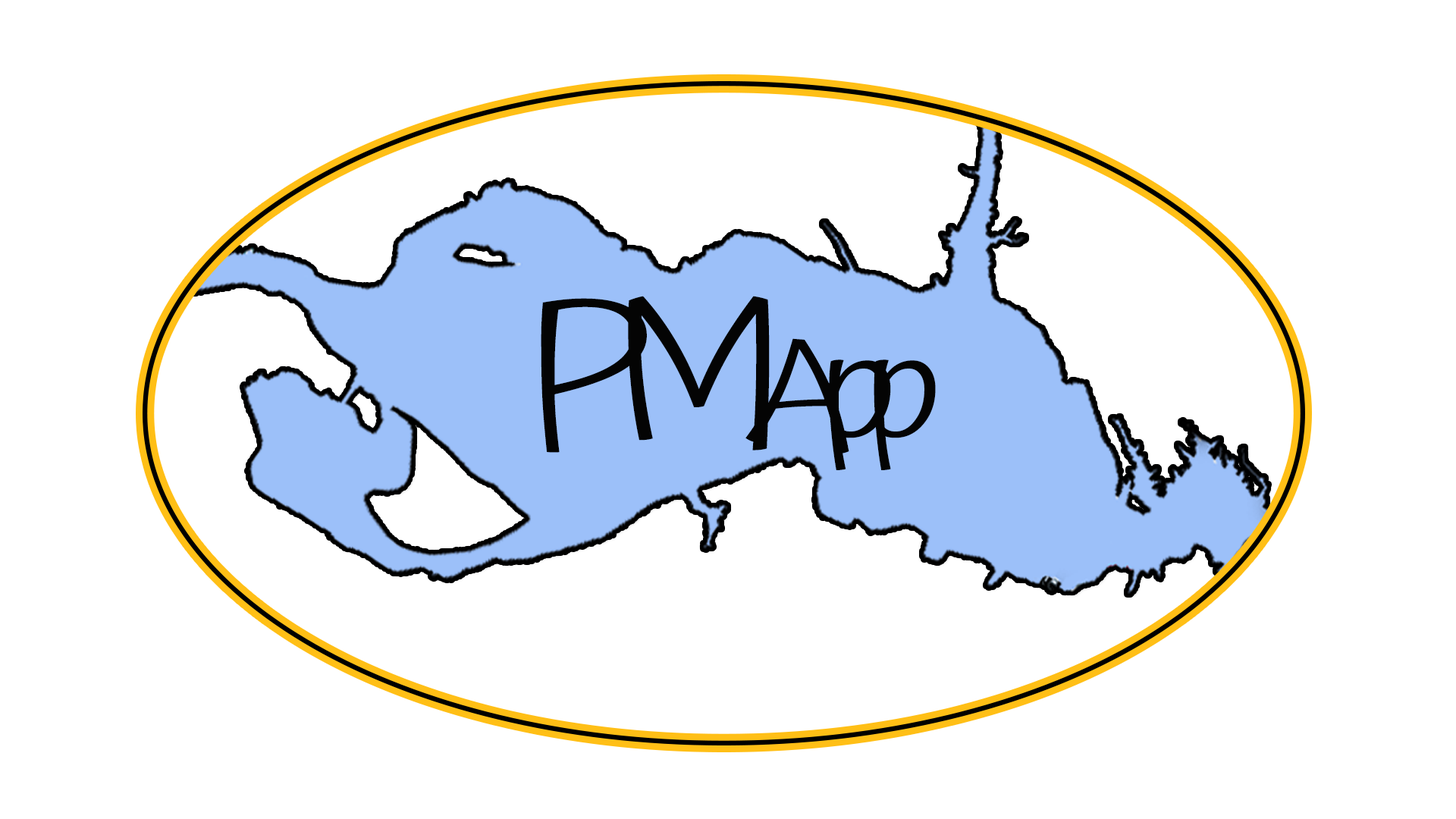
<style>
.page{position:relative;width:1456px;height:819px;background:#ffffff}
.page>*{position:absolute;margin:0}
.t1{font:142.2px "Atma-Light";letter-spacing:-0.19em;color:#040404;scale:1.3 1}
.t2{font:189.4px "Atma-Light";letter-spacing:-0.19em;color:#040404;scale:1.3 1}
</style>
<div class="page">
<p class="t1" style="left:541px;top:296px;width:395px;height:174px"><span class="t2">PM</span>App</p>
</div>
